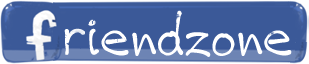
<style>
.page{position:relative;width:309px;height:64px;background:#3b5998}
.page>*{position:absolute;margin:0}
.t1{font:72px "VAG-HandWritten";color:#ffffff}
</style>
<div class="page">
<p class="t1" style="left:64px;top:10px;width:228px;height:47px">riendzone</p>
</div>
